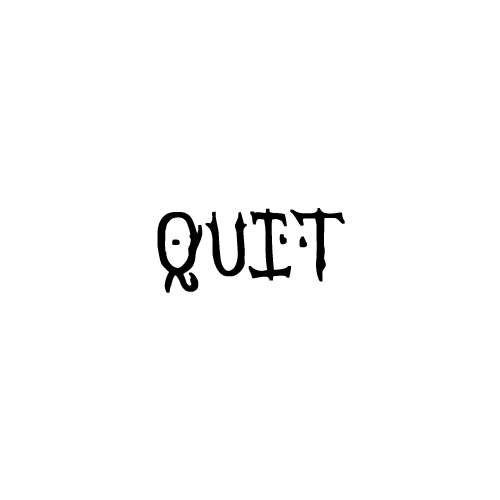
<style>
.page{position:relative;width:500px;height:500px;background:#ffffff}
.page>*{position:absolute;margin:0}
.t1{font:72px "SatanycDemoniacSt";color:#000000;font-weight:bold}
</style>
<div class="page">
<p class="t1" style="left:157px;top:208px;width:188px;height:85px">QUIT</p>
</div>
